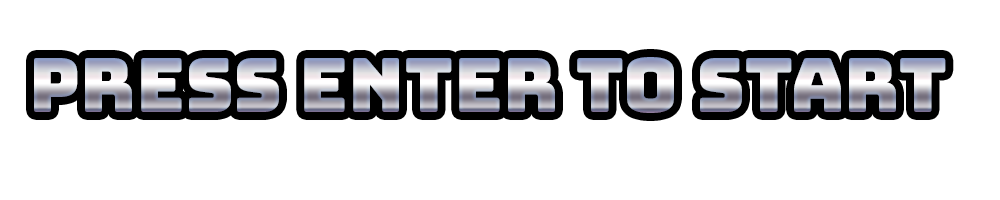
<style>
.page{position:relative;width:1000px;height:200px;background:#ffffff}
.page>*{position:absolute;margin:0}
.t1{font:75px "Bungee-Regular"}
</style>
<div class="page">
<p class="t1" style="left:34px;top:57px;width:912px;height:56px">Press Enter to Start</p>
</div>
